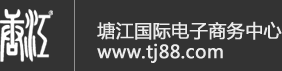
<style>
.page{position:relative;width:282px;height:71px;background:#333333}
.page>*{position:absolute;margin:0}
.t1{font:18px "MicrosoftYaHei";color:#ebebeb;font-weight:bold}
</style>
<div class="page">
<p class="t1" style="left:97px;top:21px;width:185px;height:19px">塘江国际电子商务中心</p>
<p class="t1" style="left:97px;top:43px;width:126px;height:20px">www.tj88.com</p>
</div>
